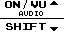
<style>
.page{position:relative;width:64px;height:32px;background:#ffffff}
.page>*{position:absolute;margin:0}
.t1{font:14px "ArcadeClassic";color:#000000;scale:1.05 1}
.t2{font:14px "MyriadPro-Regular";color:#000000;scale:1.05 1}
.t3{font:8px "04b03";color:#000000;scale:1.06 1}
</style>
<div class="page">
<p class="t1" style="left:5px;top:0px;width:41px;height:9px">ON <span class="t2">/ </span>VU</p>
<p class="t3" style="left:19px;top:11px;width:24px;height:5px">AUDIO</p>
<p class="t1" style="left:6px;top:23px;width:40px;height:7px">SHIFT</p>
</div>
